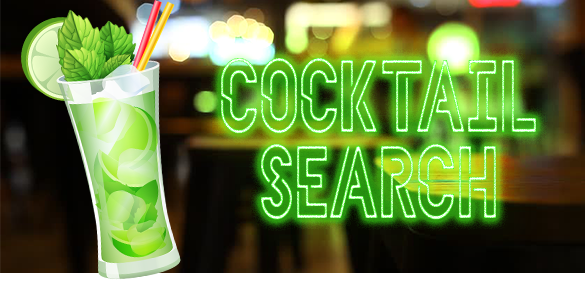
<style>
.page{position:relative;width:585px;height:283px}
.page>*{position:absolute;margin:0}
.t1{font:103.5px/86px "HELLODENVERDISPLAYREGULAR-Regular";letter-spacing:0.001em;scale:0.75 1}
</style>
<div class="page">
<p class="t1" style="left:221px;top:58px;width:315px;height:162px;text-align:center">COCKTAIL<br>SEARCH</p>
</div>
